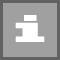
<style>
.page{position:relative;width:60px;height:60px;background:#a0a0a0}
.page>*{position:absolute;margin:0}
.t1{font:36px "BlackoakStd";color:#ffffff}
</style>
<div class="page">
<p class="t1" style="left:15px;top:15px;width:30px;height:27px">i</p>
</div>
